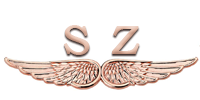
<style>
.page{position:relative;width:200px;height:100px;background:#ffffff}
.page>*{position:absolute;margin:0}
.t1{font:60px "BookmanOldStyle";color:#e3b8a4}
</style>
<div class="page">
<p class="t1" style="left:64px;top:25px;width:76px;height:30px">s z</p>
</div>
